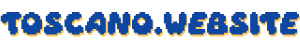
<style>
.page{position:relative;width:300px;height:43px;background:#ffffff}
.page>*{position:absolute;margin:0}
.t1{font:20px "Daydream";color:#0d47a1}
</style>
<div class="page">
<p class="t1" style="left:0px;top:12px;width:299px;height:23px">toscano.website</p>
<p class="t1" style="left:1px;top:14px;width:299px;height:23px">toscano.website</p>
</div>
